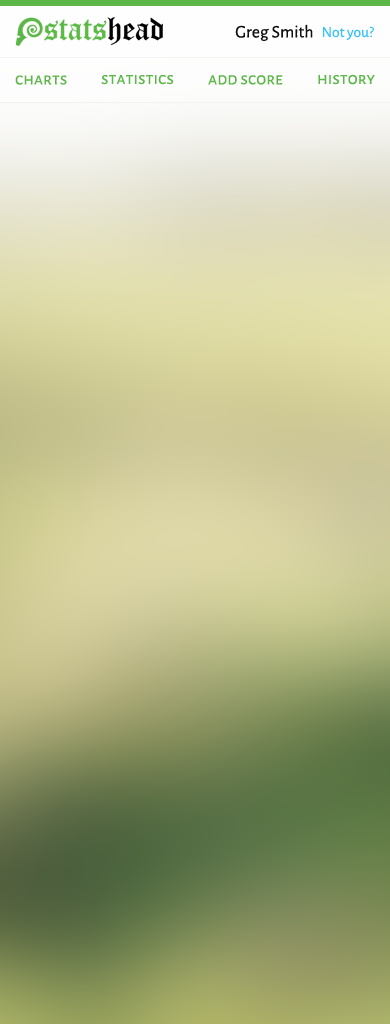
<style>
.page{position:relative;width:390px;height:1024px}
.page>*{position:absolute;margin:0}
.t1{font:17.9px "AlegreyaSans-Regular";color:#111111}
.t2{font:15.3px "AlegreyaSans-Regular";color:#37c3f7}
.t3{font:17.9px "AlegreyaSansSC-Regular";color:#5cb748}
</style>
<div class="page">
<p class="t1" style="left:235px;top:24px;width:78px;height:17px">Greg Smith</p>
<p class="t2" style="left:323px;top:26px;width:52px;height:14px">Not you?</p>
<p class="t3" style="left:15px;top:75px;width:52px;height:10px">charts</p>
<p class="t3" style="left:101px;top:75px;width:73px;height:10px">statistics</p>
<p class="t3" style="left:208px;top:75px;width:75px;height:10px">add score</p>
<p class="t3" style="left:318px;top:74px;width:57px;height:11px">history</p>
</div>
